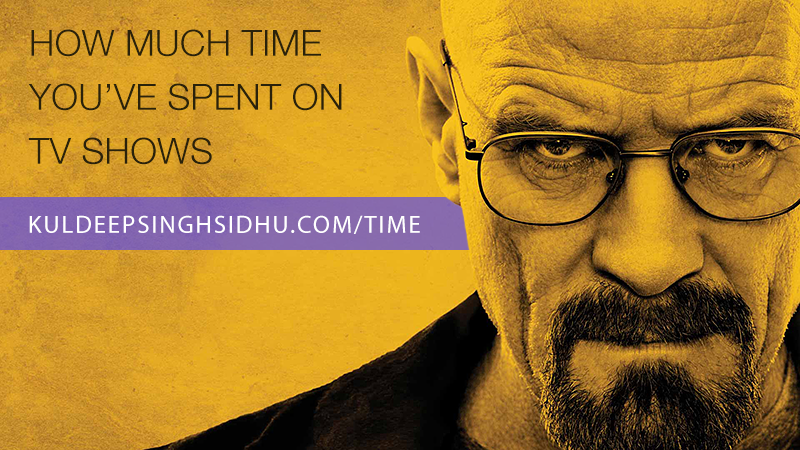
<style>
.page{position:relative;width:800px;height:450px}
.page>*{position:absolute;margin:0}
.t1{font:36px/54px "HelveticaNeue-Light";letter-spacing:0.01em;color:#2a220b;text-transform:uppercase}
.t2{font:25px "MyriadPro-Regular";letter-spacing:0.075em;color:#ffffff;text-transform:uppercase}
</style>
<div class="page">
<p class="t1" style="left:28px;top:29px;width:314px;height:136px">How much time <br>you’ve spent on <br>TV shows</p>
<p class="t2" style="left:29px;top:215px;width:391px;height:19px">kuldeepsinghsidhu.com/time</p>
</div>
